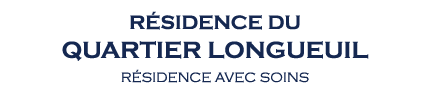
<style>
.page{position:relative;width:425px;height:93px;background:#ffffff}
.page>*{position:absolute;margin:0}
.t1{font:24px "CopperplateGothic-Bold";color:#152851}
.t2{font:20px "CopperplateGothic-Bold";color:#152851}
.t3{font:14px "CopperplateGothic-Light";color:#152851}
</style>
<div class="page">
<p class="t1" style="left:62px;top:11px;width:307px;height:50px;text-align:center"><span class="t2">RÉSIDENCE DU<br></span>QUARTIER LONGUEUIL</p>
<p class="t3" style="left:121px;top:69px;width:188px;height:14px">RÉSIDENCE AVEC SOINS</p>
</div>
